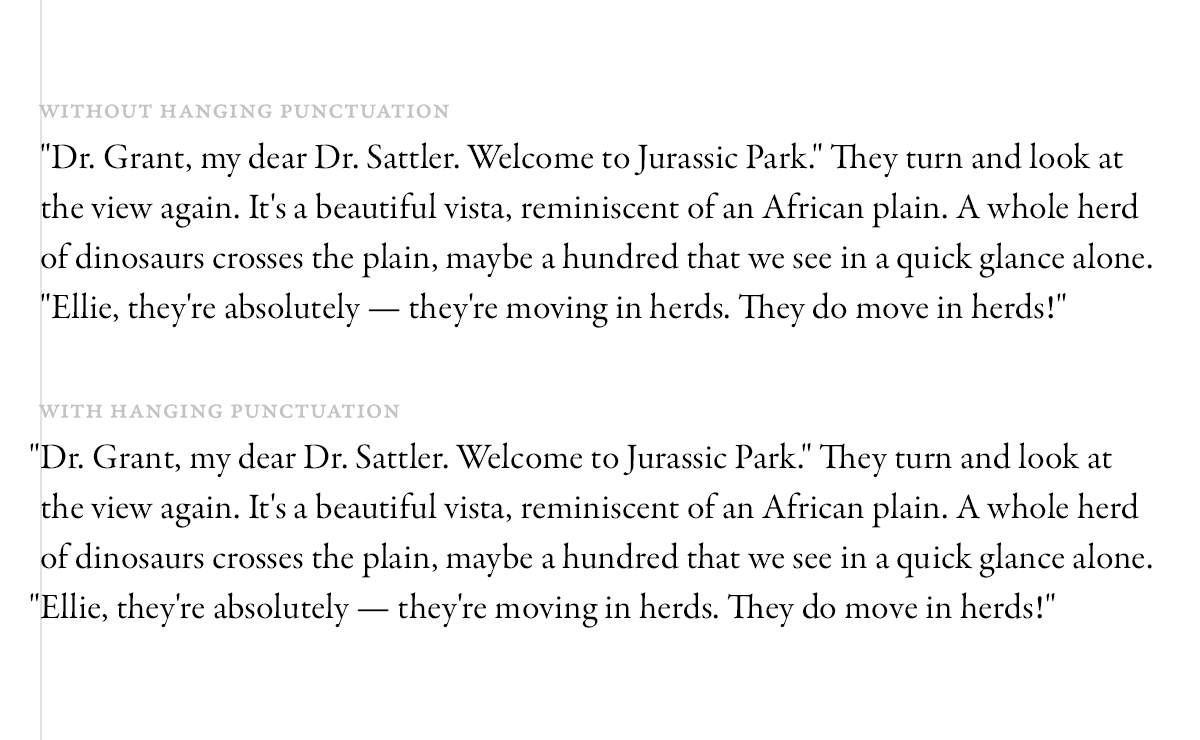
<style>
.page{position:relative;width:1200px;height:740px;background:#ffffff}
.page>*{position:absolute;margin:0}
.t1{font:28px "GaramondPremrPro-Capt";color:#c3c3c3;font-variant:small-caps}
.t2{font:36px/50px "GaramondPremrPro";color:#000000}
</style>
<div class="page">
<p class="t1" style="left:38px;top:104px;width:412px;height:14px">without hanging punctuation</p>
<p class="t2" style="left:41px;top:142px;width:1111px;height:186px">"Dr. Grant, my dear Dr. Sattler. Welcome to Jurassic Park." They turn and look at the view again. It's a beautiful vista, reminiscent of an African plain. A whole herd <br>of dinosaurs crosses the plain, maybe a hundred that we see in a quick glance alone. "Ellie, they're absolutely — they're moving in herds. They do move in herds!"</p>
<p class="t1" style="left:38px;top:404px;width:362px;height:14px">with hanging punctuation</p>
<p class="t2" style="left:30px;top:442px;width:1122px;height:186px">"Dr. Grant, my dear Dr. Sattler. Welcome to Jurassic Park." They turn and look at the view again. It's a beautiful vista, reminiscent of an African plain. A whole herd <br>of dinosaurs crosses the plain, maybe a hundred that we see in a quick glance alone. "Ellie, they're absolutely — they're moving in herds. They do move in herds!"</p>
</div>
